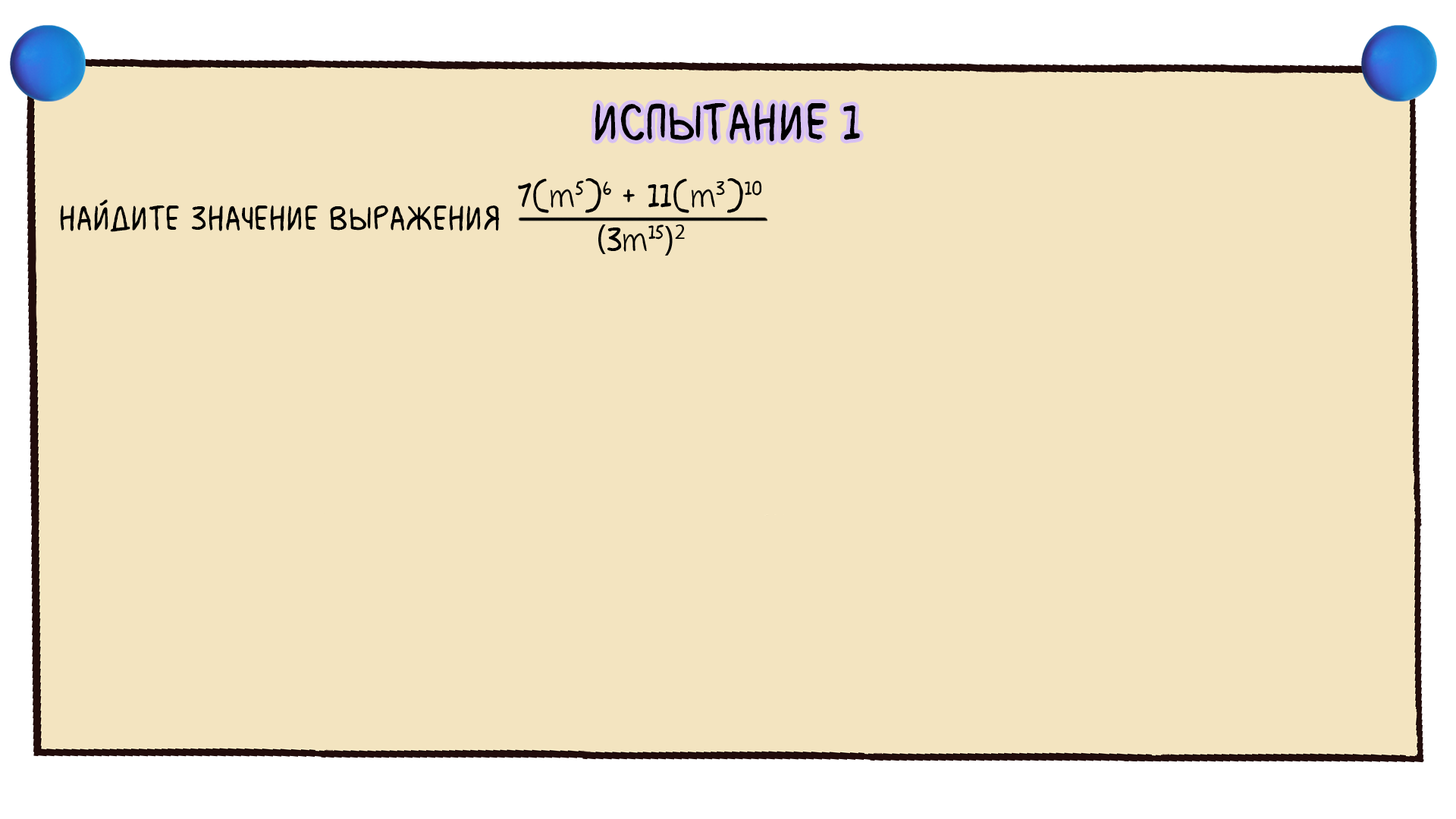
<style>
.page{position:relative;width:1456px;height:819px;background:#f3e4c0}
.page>*{position:absolute;margin:0}
.t1{font:54.6px "MilkMustacheBB";color:#000000}
.t2{font:36.4px "MilkMustacheBB";color:#000000}
</style>
<div class="page">
<p class="t1" style="left:595px;top:102px;width:265px;height:40px">испытание 1</p>
<p class="t2" style="left:60px;top:199px;width:440px;height:33px">Найдите значение выражения</p>
</div>
